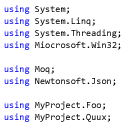
<style>
.page{position:relative;width:128px;height:128px;background:#ffffff}
.page>*{position:absolute;margin:0}
.t1{font:9.3px/12px "Consolas";color:#000000}
.t2{font:9.3px/12px "Consolas";color:#0000ff}
</style>
<div class="page">
<p class="t1" style="left:4px;top:5px;width:117px;height:117px"><span class="t2">using </span>System;<br><span class="t2">using </span>System.Linq;<br><span class="t2">using </span>System.Threading;<br><span class="t2">using </span>Miocrosoft.Win32;<br><br><span class="t2">using </span>Moq;<br><span class="t2">using </span>Newtonsoft.Json;<br><br><span class="t2">using </span>MyProject.Foo;<br><span class="t2">using </span>MyProject.Quux;</p>
</div>
